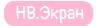
<style>
.page{position:relative;width:96px;height:26px;background:#ffb8d1}
.page>*{position:absolute;margin:0}
.t1{font:17.3px "Pangolin-Regular";color:#ffffff}
</style>
<div class="page">
<p class="t1" style="left:16px;top:6px;width:68px;height:17px">НВ.Экран</p>
</div>
